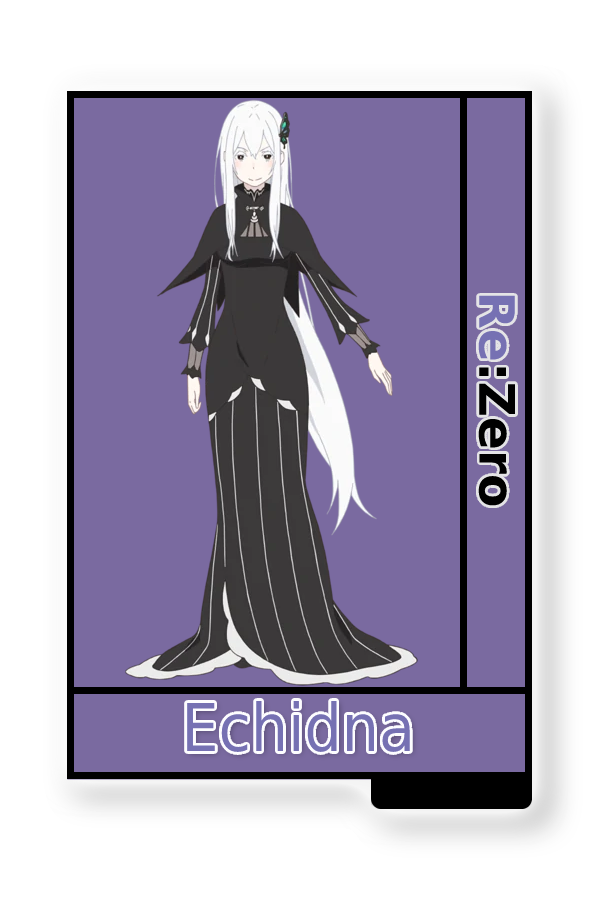
<style>
.page{position:relative;width:600px;height:900px;background:#7a6aa0}
.page>*{position:absolute;margin:0}
.t1{font:48.8px "MADETOMMY-Bold";color:#000000}
.t2{font:48.8px "MADETOMMY-Bold";color:#7671b3}
.t3{font:65.8px "CoolveticaRg-Regular";color:#7671b3;scale:0.89 1}
</style>
<div class="page">
<p class="t1" style="left:478px;top:295px;width:37px;height:211px;rotate:90deg"><span class="t2">Re</span>:Zero</p>
<p class="t3" style="left:187px;top:701px;width:223px;height:51px">Echidna</p>
</div>
